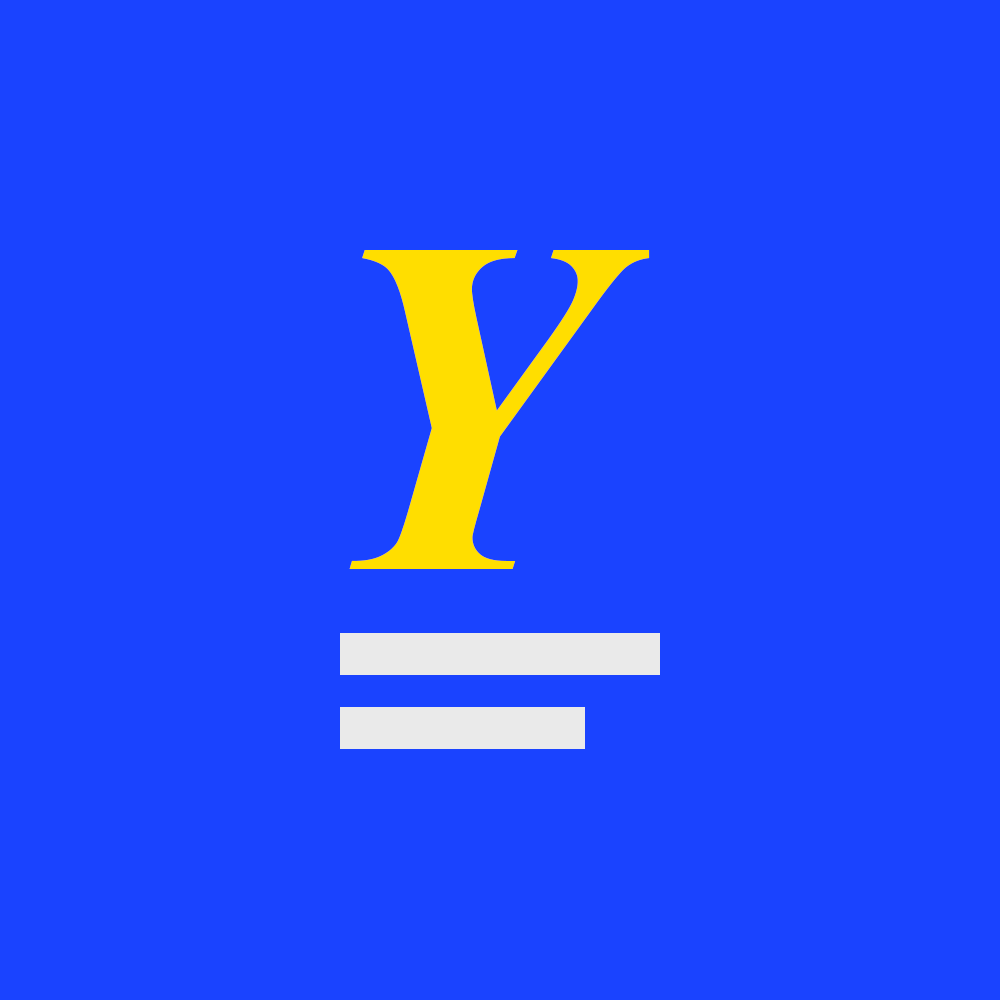
<style>
.page{position:relative;width:1000px;height:1000px;background:#1a43ff}
.page>*{position:absolute;margin:0}
.t1{font:480px "TimesNewRomanPS-BoldItalicMT";color:#ffde00}
</style>
<div class="page">
<p class="t1" style="left:349px;top:250px;width:301px;height:319px">Y</p>
</div>
